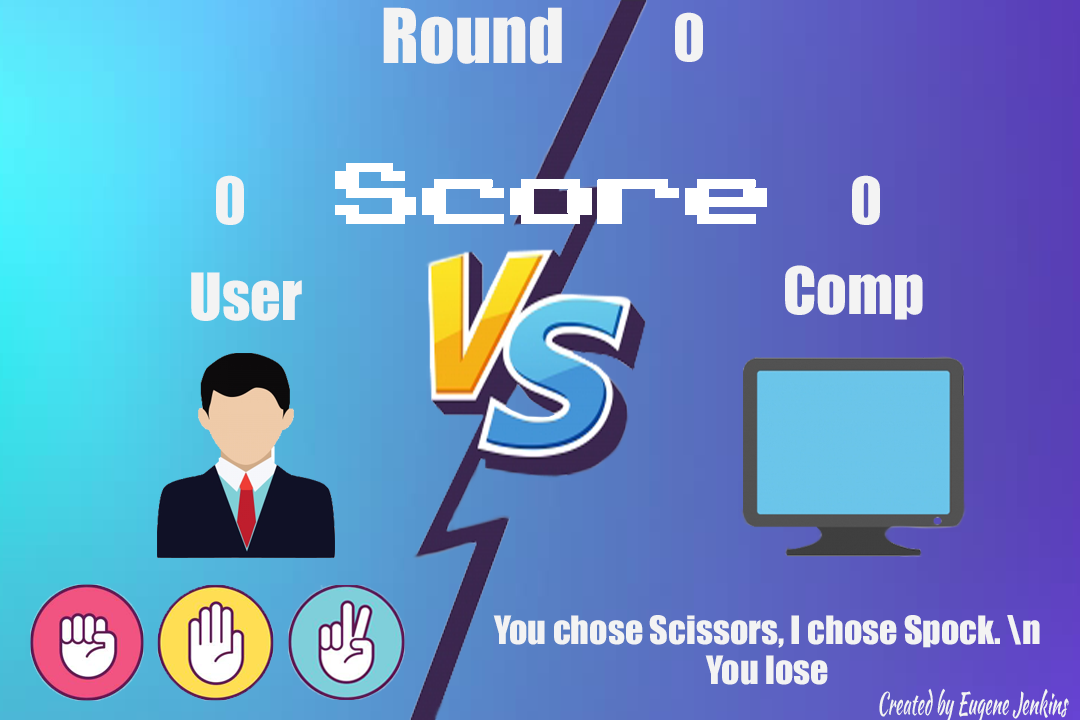
<style>
.page{position:relative;width:1080px;height:720px}
.page>*{position:absolute;margin:0}
.t1{font:70px "Impact";color:#f3f3f3}
.t2{font:60px "Impact";color:#f3f3f3}
.t3{font:36px/40px "Impact";color:#f3f3f3}
</style>
<div class="page">
<p class="t1" style="left:383px;top:7px;width:179px;height:57px">Round</p>
<p class="t2" style="left:675px;top:12px;width:28px;height:50px">0</p>
<p class="t2" style="left:216px;top:175px;width:28px;height:50px">0</p>
<p class="t2" style="left:852px;top:175px;width:28px;height:50px">0</p>
<p class="t2" style="left:785px;top:265px;width:138px;height:55px">Comp</p>
<p class="t2" style="left:191px;top:272px;width:111px;height:49px">User</p>
<p class="t3" style="left:493px;top:615px;width:547px;height:70px;text-align:center">You chose Scissors, I chose Spock. \n<br>You lose</p>
</div>
